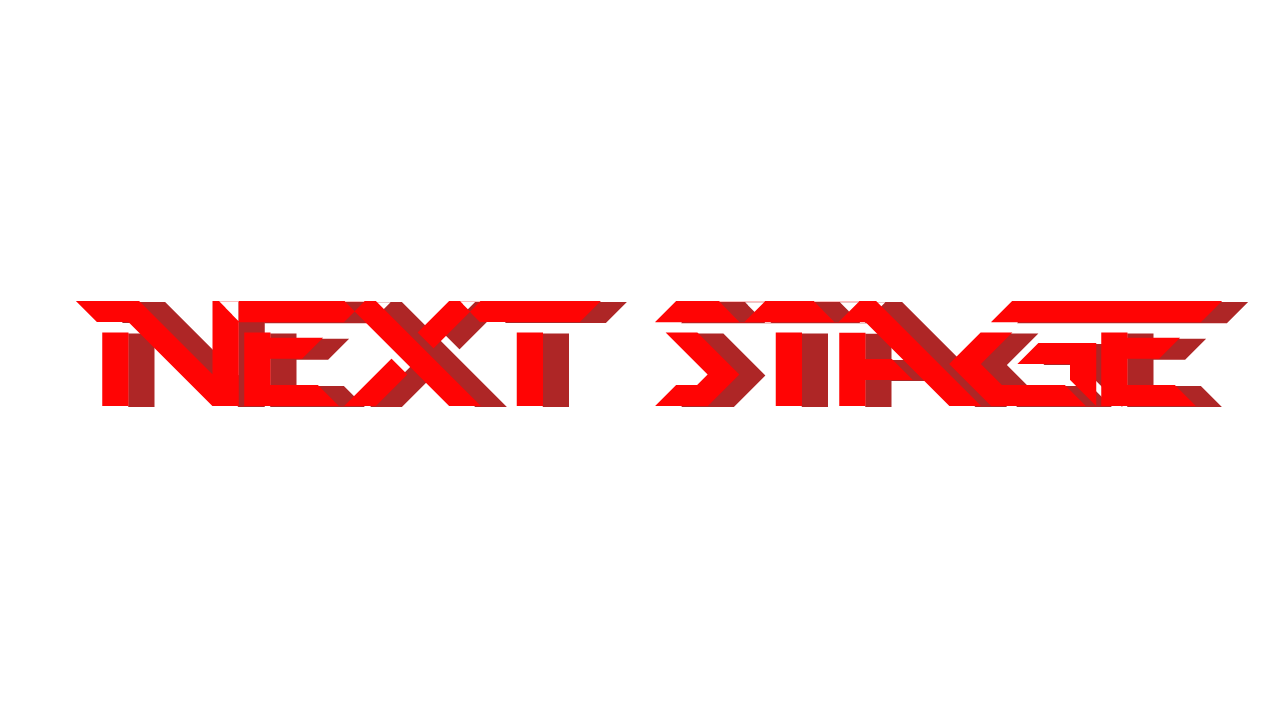
<style>
.page{position:relative;width:1280px;height:720px;background:#ffffff}
.page>*{position:absolute;margin:0}
.t1{font:150px "PerfectDark(BRK)";color:#ff0404}
.t2{font:150px "PerfectDark(BRK)"}
</style>
<div class="page">
<p class="t1" style="left:76px;top:301px;width:1146px;height:105px">Next Stage</p>
<p class="t2" style="left:102px;top:302px;width:1146px;height:105px">Next Stage</p>
</div>
